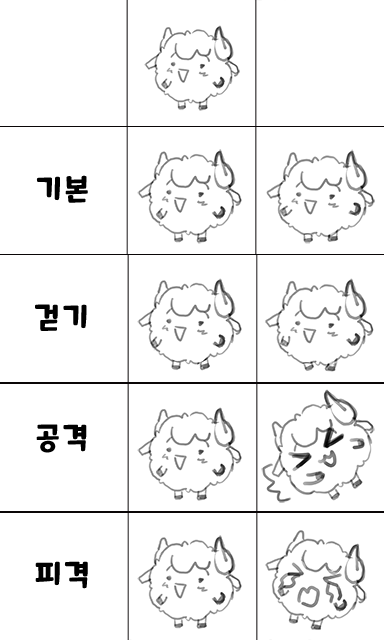
<style>
.page{position:relative;width:384px;height:640px;background:#ffffff}
.page>*{position:absolute;margin:0}
.t1{font:29.6px "MaplestoryBold";letter-spacing:0.1em;color:#000000}
</style>
<div class="page">
<p class="t1" style="left:36px;top:175px;width:52px;height:28px">기본</p>
<p class="t1" style="left:35px;top:304px;width:52px;height:27px">걷기</p>
<p class="t1" style="left:36px;top:424px;width:51px;height:29px">공격</p>
<p class="t1" style="left:35px;top:561px;width:53px;height:28px">피격</p>
</div>
